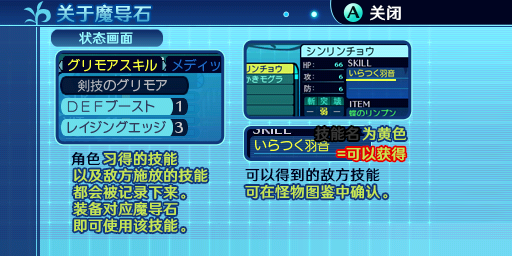
<style>
.page{position:relative;width:512px;height:256px}
.page>*{position:absolute;margin:0}
.t1{font:18.7px "HYWenHei-FEW";letter-spacing:0.025em}
.t2{font:16px "HYWenHei-FEW";letter-spacing:0.025em;color:#fefefe}
.t3{font:13.3px "HYWenHei-FEW";letter-spacing:0.025em;color:#94f7ff}
.t4{font:14.7px "HYWenHei-FEW";letter-spacing:0.025em;color:#c6e752}
.t5{font:14.7px "HYWenHei-FEW";letter-spacing:0.025em;color:#373737}
.t6{font:14.7px "HYWenHei-FEW";letter-spacing:0.025em;color:#000421}
.t7{font:14.7px/16.7px "HYWenHei-FEW";letter-spacing:0.025em;color:#c6e752}
</style>
<div class="page">
<p class="t1" style="left:57px;top:4px;width:94px;height:19px">关于魔导石</p>
<p class="t2" style="left:370px;top:5px;width:31px;height:16px">关闭</p>
<p class="t3" style="left:79px;top:32px;width:54px;height:13px">状态画面</p>
<p class="t4" style="left:362px;top:126px;width:44px;height:15px">为黄色</p>
<p class="t5" style="left:315px;top:127px;width:44px;height:14px">技能名</p>
<p class="t4" style="left:337px;top:147px;width:69px;height:14px">=可以获得</p>
<p class="t6" style="left:71px;top:151px;width:29px;height:15px">角色</p>
<p class="t7" style="left:73px;top:151px;width:135px;height:82px">习得的技能<br>以及敌方施放的技能<br>都会被记录下来。<br>装备对应魔导石<br>即可使用该技能。</p>
<p class="t6" style="left:245px;top:167px;width:135px;height:15px">可以得到的敌方技能</p>
<p class="t4" style="left:245px;top:185px;width:143px;height:14px">可在怪物图鉴中确认。</p>
</div>
